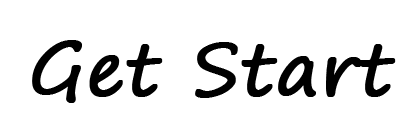
<style>
.page{position:relative;width:420px;height:140px;background:#ffffff}
.page>*{position:absolute;margin:0}
.t1{font:72px "SegoePrint";color:#000000;font-weight:bold}
</style>
<div class="page">
<p class="t1" style="left:32px;top:40px;width:364px;height:63px">Get Start</p>
</div>
